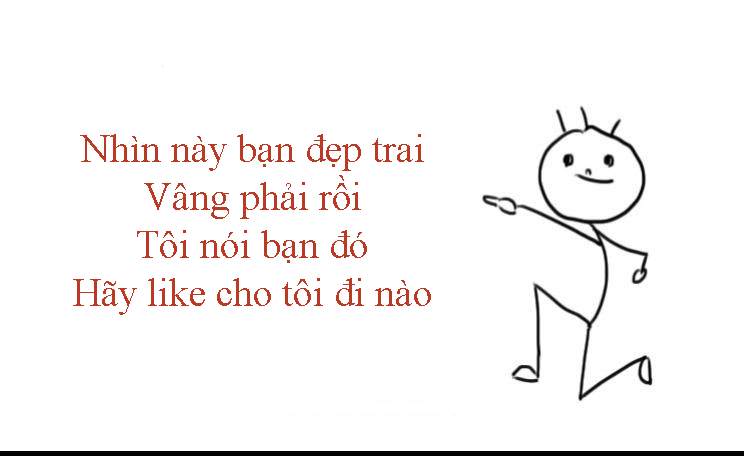
<style>
.page{position:relative;width:744px;height:456px;background:#ffffff}
.page>*{position:absolute;margin:0}
.t1{font:40px "TimesNewRomanPSMT";color:#bb3a26}
</style>
<div class="page">
<p class="t1" style="left:73px;top:134px;width:358px;height:181px;text-align:center">Nhìn này bạn đẹp trai<br>Vâng phải rồi<br>Tôi nói bạn đó<br>Hãy like cho tôi đi nào</p>
</div>
